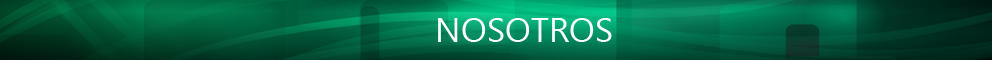
<style>
.page{position:relative;width:992px;height:60px}
.page>*{position:absolute;margin:0}
.t1{font:34.3px "Ebrima";color:#ffffff}
</style>
<div class="page">
<p class="t1" style="left:438px;top:18px;width:174px;height:24px">NOSOTROS</p>
</div>
